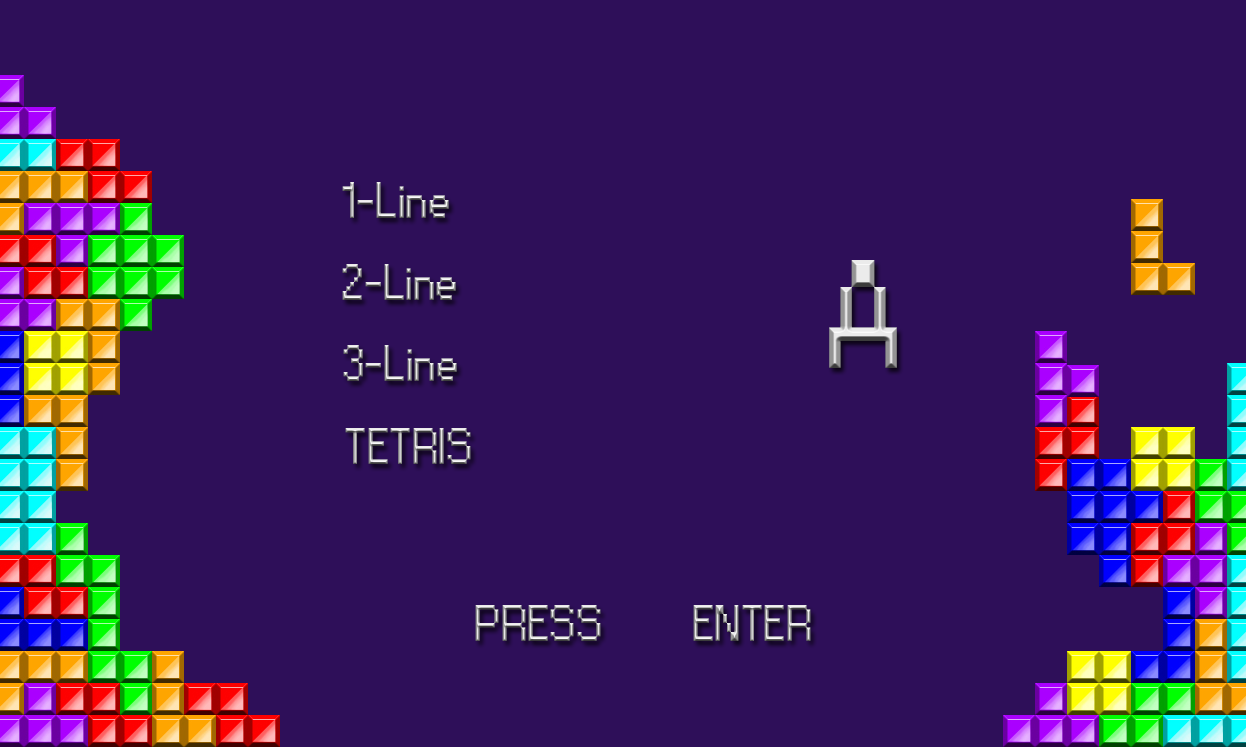
<style>
.page{position:relative;width:1246px;height:747px;background:#2e0f59}
.page>*{position:absolute;margin:0}
.t1{font:48px "Small Fonts"}
.t2{font:144px "Small Fonts"}
</style>
<div class="page">
<p class="t1" style="left:342px;top:182px;width:107px;height:36px">1-Line</p>
<p class="t1" style="left:342px;top:264px;width:114px;height:36px">2-Line</p>
<p class="t2" style="left:829px;top:260px;width:68px;height:108px">A</p>
<p class="t1" style="left:343px;top:345px;width:114px;height:36px">3-Line</p>
<p class="t1" style="left:345px;top:428px;width:126px;height:36px">TETRIS</p>
<p class="t1" style="left:475px;top:605px;width:336px;height:36px">PRESS            ENTER</p>
</div>
